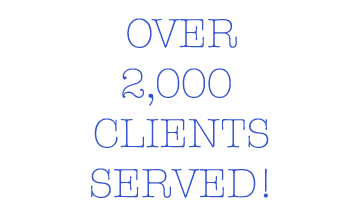
<style>
.page{position:relative;width:360px;height:220px;background:#ffffff}
.page>*{position:absolute;margin:0}
.t1{font:41.7px "AmericanTypewriter-Light";color:#3454d1}
</style>
<div class="page">
<p class="t1" style="left:91px;top:18px;width:178px;height:180px;text-align:center">OVER<br>2,000 <br>CLIENTS<br>SERVED!</p>
</div>
